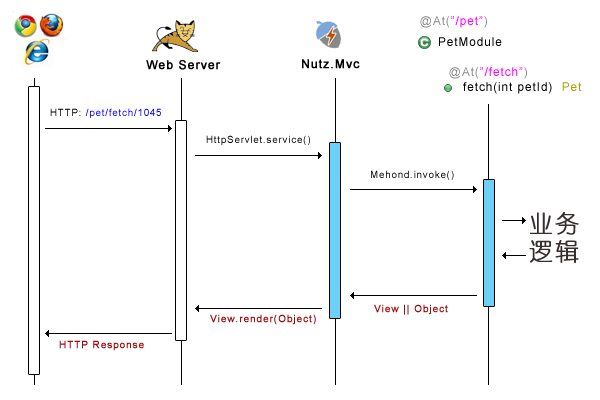
<style>
.page{position:relative;width:600px;height:400px;background:#ffffff}
.page>*{position:absolute;margin:0}
.t1{font:12px "ArialMT";letter-spacing:0.08em;color:#ff00ff}
.t2{font:12px "ArialMT";letter-spacing:0.08em;color:#898989}
.t3{font:12px "ArialMT";letter-spacing:0.08em;color:#000000}
.t4{font:12px "ArialMT";letter-spacing:0.08em;color:#000000;font-weight:bold}
.t5{font:12px "ArialMT";letter-spacing:0.08em;color:#aba000}
.t6{font:10px "ArialMT";letter-spacing:0.08em;color:#0000ff}
.t7{font:10px "ArialMT";letter-spacing:0.08em;color:#000000}
.t8{font:24px/28px "YouYuan";letter-spacing:0.08em;color:#362f2d;font-weight:bold}
.t9{font:10px "ArialMT";letter-spacing:0.08em;color:#9e0b0f;font-weight:bold}
</style>
<div class="page">
<p class="t1" style="left:420px;top:16px;width:67px;height:12px"><span class="t2">@At(</span>”/pet”<span class="t2">)</span></p>
<p class="t3" style="left:439px;top:37px;width:63px;height:9px">PetModule</p>
<p class="t4" style="left:146px;top:60px;width:75px;height:10px">Web Server</p>
<p class="t4" style="left:302px;top:59px;width:58px;height:10px">Nutz.Mvc</p>
<p class="t1" style="left:449px;top:67px;width:78px;height:12px"><span class="t2">@At(</span>”/fetch”<span class="t2">)</span></p>
<p class="t3" style="left:463px;top:82px;width:119px;height:12px">fetch(int petId)  <span class="t5">Pet</span></p>
<p class="t6" style="left:50px;top:108px;width:111px;height:10px"><span class="t7">HTTP: </span>/pet/fetch/1045</p>
<p class="t7" style="left:206px;top:135px;width:104px;height:10px">HttpServlet.service()</p>
<p class="t7" style="left:371px;top:170px;width:83px;height:10px">Mehond.invoke()</p>
<p class="t8" style="left:529px;top:212px;width:50px;height:51px">业务<br>逻辑</p>
<p class="t9" style="left:374px;top:304px;width:74px;height:11px">View || Object</p>
<p class="t9" style="left:210px;top:314px;width:106px;height:11px">View.render(Object)</p>
<p class="t9" style="left:59px;top:340px;width:85px;height:11px">HTTP Response</p>
</div>
